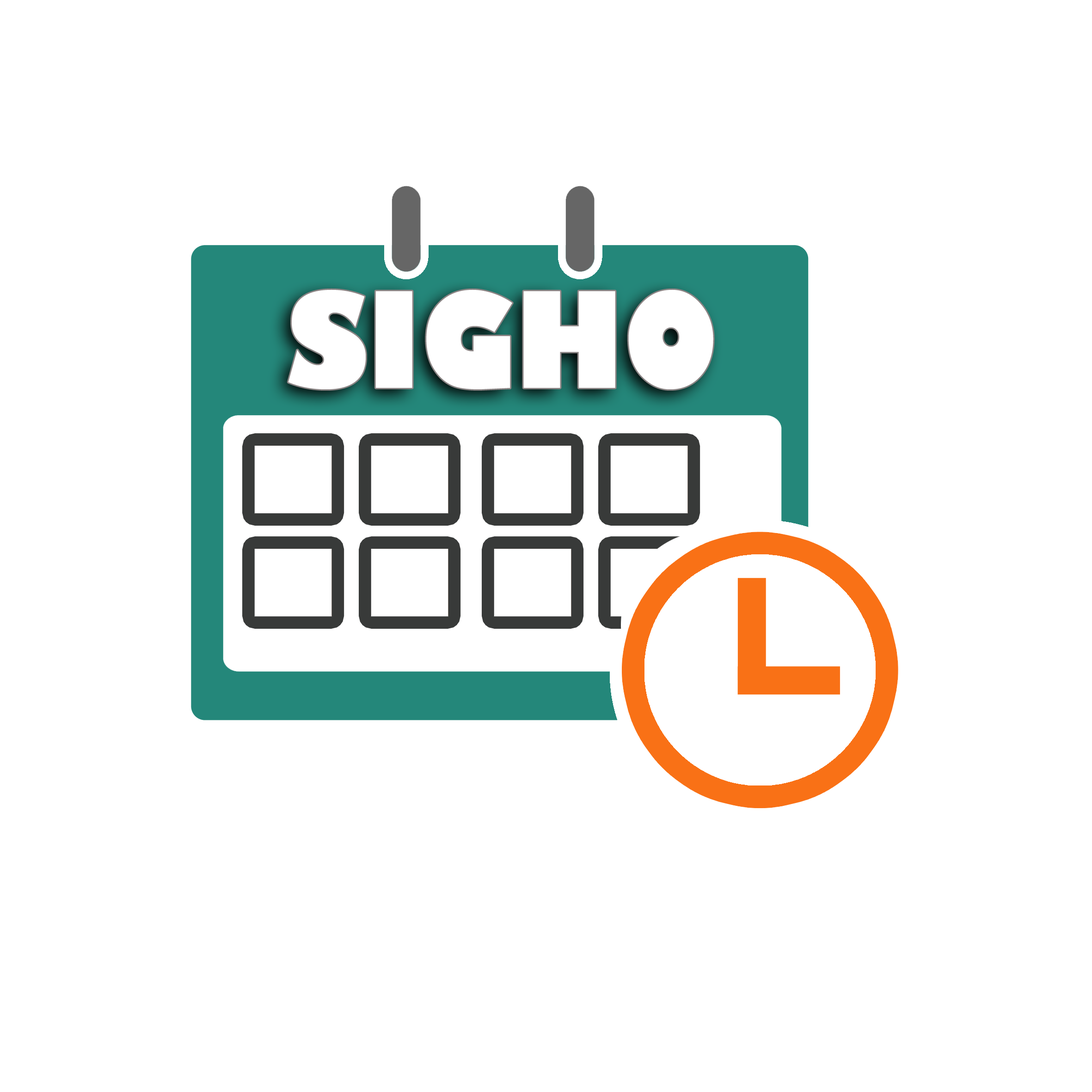
<style>
.page{position:relative;width:1092px;height:1092px;background:#ffffff}
.page>*{position:absolute;margin:0}
.t1{font:130px "GillSans-UltraBoldCondensed";color:#ffffff;scale:1.25 1}
</style>
<div class="page">
<p class="t1" style="left:288px;top:289px;width:425px;height:100px">SIGHO</p>
</div>
